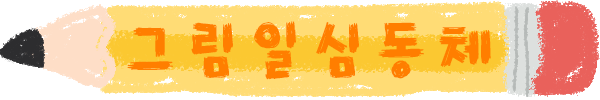
<style>
.page{position:relative;width:600px;height:100px;background:#ffdc75}
.page>*{position:absolute;margin:0}
.t1{font:59.2px "TTYeonpilsketchR";letter-spacing:0.24em;color:#ff7e00}
</style>
<div class="page">
<p class="t1" style="left:127px;top:21px;width:364px;height:59px">그림일심동체</p>
</div>
